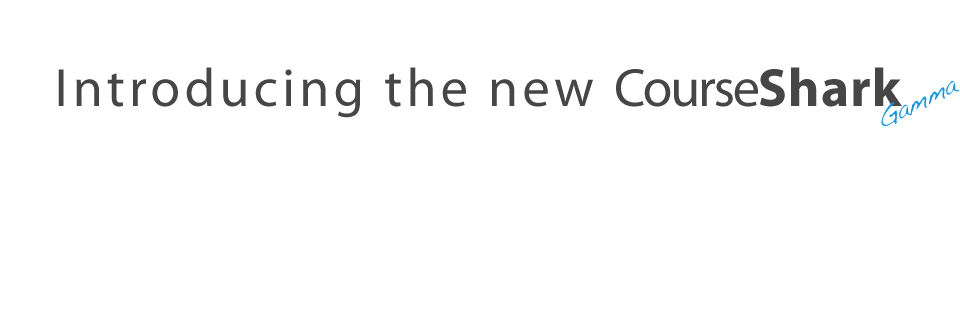
<style>
.page{position:relative;width:960px;height:333px;background:#ffffff}
.page>*{position:absolute;margin:0}
.t1{font:54.2px "MyriadPro-Regular";letter-spacing:0.08em;color:#464646}
.t2{font:54.2px "MyriadPro-Regular";letter-spacing:-0.04em;color:#464646}
.t3{font:54.2px "MyriadPro-Bold";letter-spacing:0.02em;color:#464646}
.t4{font:25.4px "Handwriting-Dakota";letter-spacing:-0.02em;color:#0b96f1}
</style>
<div class="page">
<p class="t1" style="left:58px;top:67px;width:844px;height:51px">Introducing the new <span class="t2">Course</span><span class="t3">Shark</span></p>
<p class="t4" style="left:881px;top:81px;width:78px;height:45px;rotate:-27deg">Gamma</p>
</div>
